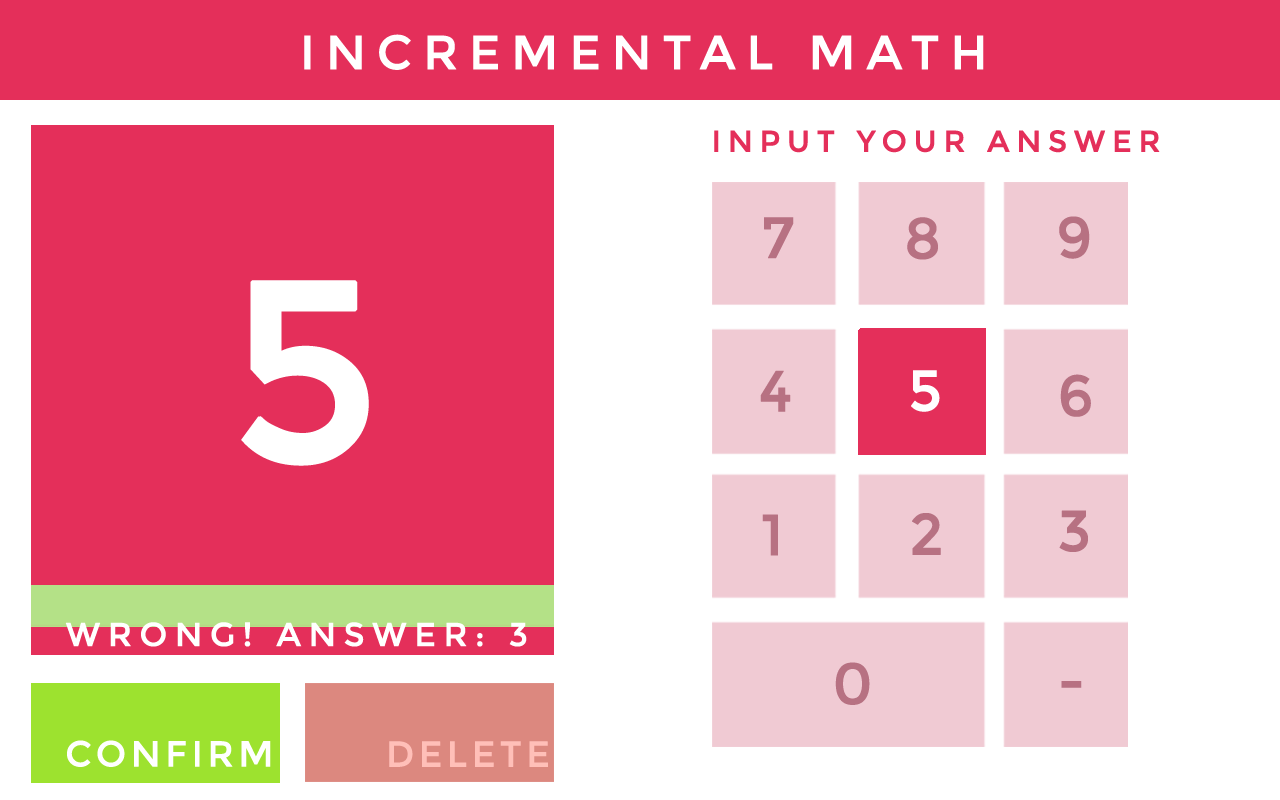
<style>
.page{position:relative;width:1280px;height:800px;background:#ffffff}
.page>*{position:absolute;margin:0}
.t1{font:48px "Montserrat-Regular";letter-spacing:0.2em;color:#ffffff;text-transform:uppercase;font-weight:bold}
.t2{font:30px "Montserrat-Regular";letter-spacing:0.2em;color:#e42f5a;text-transform:uppercase;font-weight:bold}
.t3{font:57.6px "Montserrat-Regular";letter-spacing:0.2em;color:#b77182;text-transform:uppercase;font-weight:bold}
.t4{font:256.5px "Montserrat-Regular";letter-spacing:0.2em;color:#ffffff;text-transform:uppercase;font-weight:bold}
.t5{font:57.6px "Montserrat-Regular";letter-spacing:0.2em;color:#ffffff;text-transform:uppercase;font-weight:bold}
.t6{font:33.1px "Montserrat-Regular";letter-spacing:0.2em;color:#ffffff;text-transform:uppercase;font-weight:bold}
.t7{font:36px "Montserrat-Regular";letter-spacing:0.1em;color:#ffffff;text-transform:uppercase;font-weight:bold}
.t8{font:36px "Montserrat-Regular";letter-spacing:0.1em;color:#ffbfb8;text-transform:uppercase;font-weight:bold}
</style>
<div class="page">
<p class="t1" style="left:304px;top:34px;width:680px;height:36px">Incremental Math</p>
<p class="t2" style="left:714px;top:130px;width:446px;height:23px">Input your Answer</p>
<p class="t3" style="left:764px;top:217px;width:30px;height:42px">7</p>
<p class="t3" style="left:907px;top:217px;width:31px;height:43px">8</p>
<p class="t3" style="left:1059px;top:216px;width:31px;height:43px">9</p>
<p class="t4" style="left:241px;top:280px;width:128px;height:186px">5</p>
<p class="t3" style="left:760px;top:370px;width:31px;height:42px">4</p>
<p class="t5" style="left:911px;top:370px;width:29px;height:42px">5</p>
<p class="t3" style="left:1060px;top:374px;width:31px;height:43px">6</p>
<p class="t3" style="left:1059px;top:510px;width:29px;height:42px">3</p>
<p class="t3" style="left:762px;top:514px;width:16px;height:42px">1</p>
<p class="t3" style="left:912px;top:513px;width:29px;height:42px">2</p>
<p class="t6" style="left:65px;top:622px;width:462px;height:25px">Wrong! Answer: 3</p>
<p class="t3" style="left:835px;top:662px;width:35px;height:43px">0</p>
<p class="t3" style="left:1061px;top:681px;width:21px;height:7px">-</p>
<p class="t7" style="left:67px;top:740px;width:204px;height:27px">Confirm</p>
<p class="t8" style="left:389px;top:741px;width:159px;height:26px">Delete</p>
</div>
